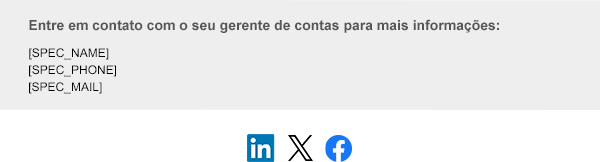
<style>
.page{position:relative;width:600px;height:162px;background:#eeeeee}
.page>*{position:absolute;margin:0}
.t1{font:14px "Arial-BoldMT";color:#565656}
.t2{font:12px/11px "ArialMT";color:#000000}
</style>
<div class="page">
<p class="t1" style="left:29px;top:19px;width:470px;height:14px">Entre em contato com o seu gerente de contas para mais informações:</p>
<p class="t2" style="left:29px;top:48px;width:87px;height:46px">[SPEC_NAME]<br>[SPEC_PHONE]<br>[SPEC_MAIL]</p>
</div>
